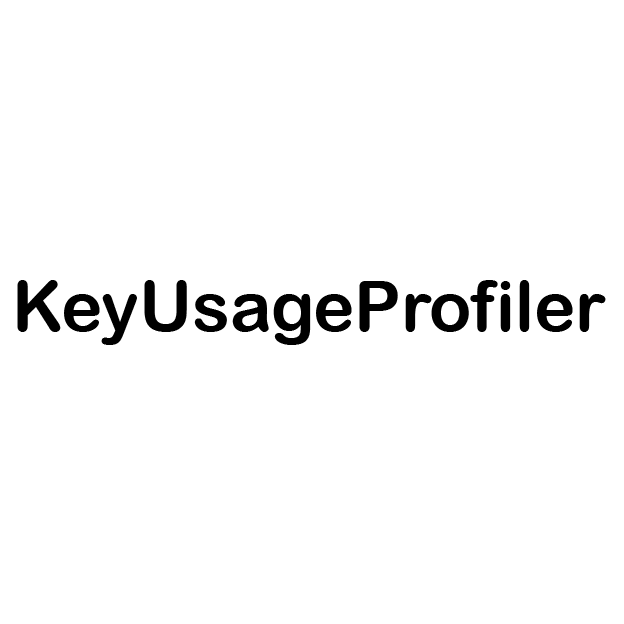
<style>
.page{position:relative;width:624px;height:624px;background:#ffffff}
.page>*{position:absolute;margin:0}
.t1{font:70px "ArialRoundedMTBold";color:#000000}
</style>
<div class="page">
<p class="t1" style="left:17px;top:280px;width:589px;height:65px">KeyUsageProfiler</p>
</div>
